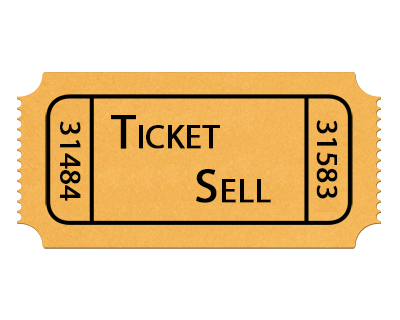
<style>
.page{position:relative;width:400px;height:320px;background:#ffffff}
.page>*{position:absolute;margin:0}
.t1{font:30px "MyriadPro-Regular";color:#030303;font-variant:small-caps;font-weight:bold}
.t2{font:48px "MyriadPro-Regular";color:#030303;font-variant:small-caps;font-weight:bold}
</style>
<div class="page">
<p class="t1" style="left:60px;top:121px;width:21px;height:80px;rotate:90deg">31484</p>
<p class="t2" style="left:111px;top:115px;width:109px;height:34px">Ticket</p>
<p class="t1" style="left:316px;top:120px;width:22px;height:79px;rotate:90deg">31583</p>
<p class="t2" style="left:196px;top:169px;width:75px;height:34px">Sell</p>
</div>
